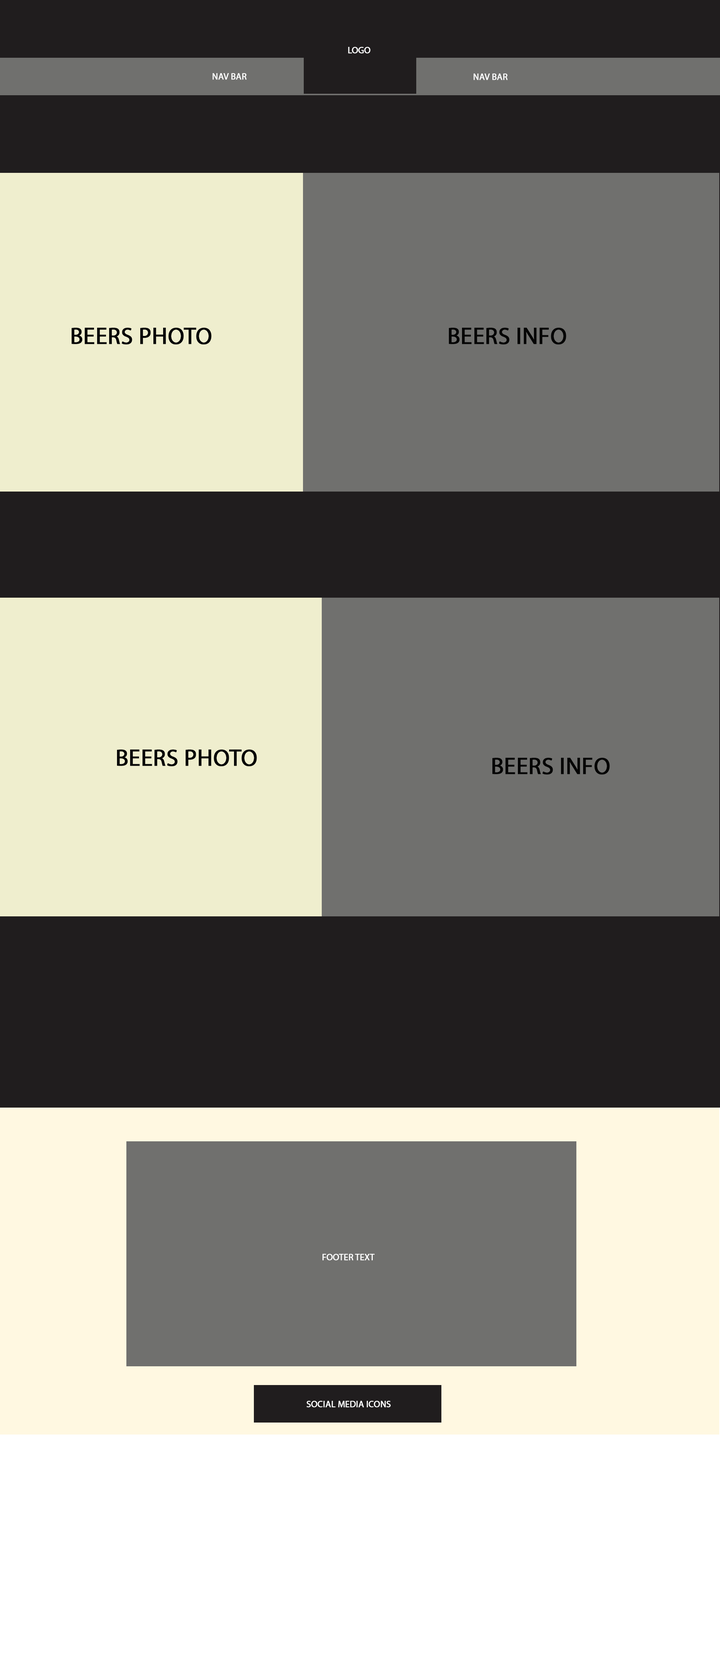
<style>
.page{position:relative;width:720px;height:1676px;background:#70706e}
.page>*{position:absolute;margin:0}
.t1{font:9px "MyriadPro-Regular";letter-spacing:-0.003em;color:#ffffff;font-weight:bold}
.t2{font:9px "MyriadPro-Regular";letter-spacing:-0.003em;color:#fefefe;font-weight:bold}
.t3{font:23.6px "MyriadPro-Regular";letter-spacing:-0.003em;color:#050505;font-weight:bold}
</style>
<div class="page">
<p class="t1" style="left:348px;top:47px;width:22px;height:7px">LOGO</p>
<p class="t2" style="left:213px;top:73px;width:34px;height:7px">NAV BAR</p>
<p class="t2" style="left:474px;top:74px;width:34px;height:6px">NAV BAR</p>
<p class="t3" style="left:72px;top:328px;width:140px;height:17px">BEERS PHOTO</p>
<p class="t3" style="left:449px;top:328px;width:117px;height:17px">BEERS INFO</p>
<p class="t3" style="left:117px;top:750px;width:140px;height:16px">BEERS PHOTO</p>
<p class="t3" style="left:492px;top:758px;width:118px;height:17px">BEERS INFO</p>
<p class="t1" style="left:322px;top:1254px;width:53px;height:7px">FOOTER TEXT</p>
<p class="t1" style="left:306px;top:1401px;width:85px;height:7px">SOCIAL MEDIA ICONS</p>
</div>
